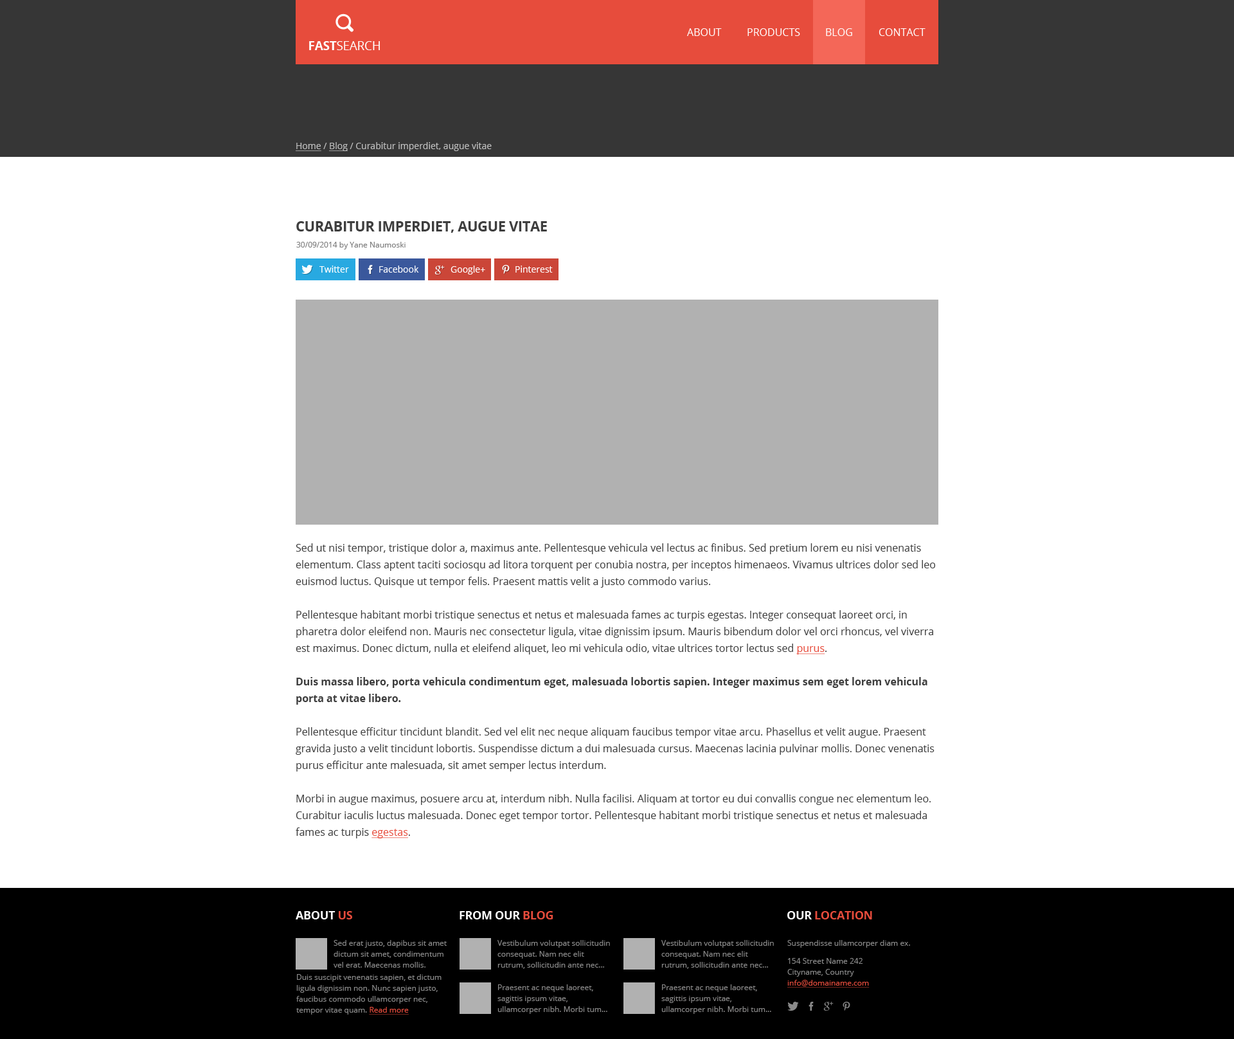
<style>
.page{position:relative;width:1234px;height:1039px;background:#ffffff}
.page>*{position:absolute;margin:0}
.t1{font:10.3px "OpenSans";color:#ffffff;text-transform:uppercase}
.t2{font:9px "OpenSans";color:#bfbfbf}
.t3{font:9px "OpenSans";color:#bfbfbf;text-decoration:underline}
.t4{font:14.1px "OpenSans-Bold";letter-spacing:-0.02em;color:#3e3e3e;text-transform:uppercase}
.t5{font:7.7px "OpenSans";color:#808080}
.t6{font:9px "OpenSans";color:#ffffff}
.t7{font:10.3px/16.7px "OpenSans";color:#3e3e3e}
.t8{font:10.3px/16.7px "OpenSans";color:#e74c3c;text-decoration:underline}
.t9{font:10.3px/16.7px "OpenSans-Bold";color:#3e3e3e}
.t10{font:11.6px "OpenSans-Bold";letter-spacing:-0.02em;color:#ffffff;text-transform:uppercase}
.t11{font:11.6px "OpenSans-Bold";letter-spacing:-0.02em;color:#e74c3c;text-transform:uppercase}
.t12{font:7.7px/10.9px "OpenSans";color:#8a8a8a}
.t13{font:7.7px/18px "OpenSans";color:#8a8a8a}
.t14{font:7.7px/10.9px "OpenSans";color:#e74c3c;text-decoration:underline}
.t15{font:7.7px/10.9px "OpenSans";color:#8a8989}
</style>
<div class="page">
<p class="t1" style="left:687px;top:28px;width:35px;height:8px">About</p>
<p class="t1" style="left:748px;top:28px;width:52px;height:8px">products</p>
<p class="t1" style="left:826px;top:28px;width:26px;height:8px">blog</p>
<p class="t1" style="left:879px;top:28px;width:47px;height:8px">Contact</p>
<p class="t2" style="left:296px;top:142px;width:196px;height:9px"><span class="t3">Home</span> / <span class="t3">Blog</span> / Curabitur imperdiet, augue vitae</p>
<p class="t4" style="left:296px;top:221px;width:251px;height:12px">Curabitur imperdiet, augue vitae</p>
<p class="t5" style="left:296px;top:242px;width:110px;height:7px">30/09/2014 by Yane Naumoski</p>
<p class="t6" style="left:320px;top:266px;width:29px;height:7px">Twitter</p>
<p class="t6" style="left:379px;top:266px;width:40px;height:7px">Facebook</p>
<p class="t6" style="left:451px;top:266px;width:34px;height:8px">Google+</p>
<p class="t6" style="left:516px;top:266px;width:37px;height:7px">Pinterest</p>
<p class="t7" style="left:296px;top:543px;width:640px;height:295px">Sed ut nisi tempor, tristique dolor a, maximus ante. Pellentesque vehicula vel lectus ac finibus. Sed pretium lorem eu nisi venenatis elementum. Class aptent taciti sociosqu ad litora torquent per conubia nostra, per inceptos himenaeos. Vivamus ultrices dolor sed leo euismod luctus. Quisque ut tempor felis. Praesent mattis velit a justo commodo varius.<br><br>Pellentesque habitant morbi tristique senectus et netus et malesuada fames ac turpis egestas. Integer consequat laoreet orci, in pharetra dolor eleifend non. Mauris nec consectetur ligula, vitae dignissim ipsum. Mauris bibendum dolor vel orci rhoncus, vel viverra est maximus. Donec dictum, nulla et eleifend aliquet, leo mi vehicula odio, vitae ultrices tortor lectus sed <span class="t8">purus</span>.<br><br><span class="t9">Duis massa libero, porta vehicula condimentum eget, malesuada lobortis sapien. Integer maximus sem eget lorem vehicula porta at vitae libero.<br></span><br>Pellentesque efficitur tincidunt blandit. Sed vel elit nec neque aliquam faucibus tempor vitae arcu. Phasellus et velit augue. Praesent gravida justo a velit tincidunt lobortis. Suspendisse dictum a dui malesuada cursus. Maecenas lacinia pulvinar mollis. Donec venenatis purus efficitur ante malesuada, sit amet semper lectus interdum.<br><br>Morbi in augue maximus, posuere arcu at, interdum nibh. Nulla facilisi. Aliquam at tortor eu dui convallis congue nec elementum leo. Curabitur iaculis luctus malesuada. Donec eget tempor tortor. Pellentesque habitant morbi tristique senectus et netus et malesuada fames ac turpis <span class="t8">egestas</span>.<br><br>In tellus tellus, feugiat id magna ut, bibendum vulputate sapien. Sed at nunc vitae quam facilisis commodo. Sed sagittis vulputate ipsum, eu porta tellus auctor ut. Cras pulvinar eleifend ex, nec placerat velit eleifend a. Vestibulum iaculis ex magna, a maximus enim mattis vitae. Duis feugiat congue gravida. Fusce nec nunc at felis dignissim luctus. Nam vestibulum massa sed lobortis euismod.</p>
<p class="t10" style="left:296px;top:911px;width:56px;height:8px">About <span class="t11">us</span></p>
<p class="t10" style="left:460px;top:911px;width:94px;height:8px">From our <span class="t11">blog</span></p>
<p class="t11" style="left:788px;top:911px;width:84px;height:8px"><span class="t10">our </span>Location</p>
<p class="t12" style="left:334px;top:940px;width:113px;height:28px">Sed erat justo, dapibus sit amet dictum sit amet, condimentum vel erat. Maecenas mollis. tincidunt sollicitudin</p>
<p class="t12" style="left:498px;top:940px;width:112px;height:29px">Vestibulum volutpat sollicitudin consequat. Nam nec elit rutrum, sollicitudin ante nec...</p>
<p class="t12" style="left:662px;top:940px;width:112px;height:29px">Vestibulum volutpat sollicitudin consequat. Nam nec elit rutrum, sollicitudin ante nec...</p>
<p class="t12" style="left:788px;top:940px;width:122px;height:47px">Suspendisse ullamcorper diam ex.<br><span class="t13">154 Street Name 242<br></span>Cityname, Country<br><span class="t14">info@domainame.com</span></p>
<p class="t12" style="left:296px;top:974px;width:146px;height:40px">Duis suscipit venenatis sapien, et dictum ligula dignissim non. Nunc sapien justo, faucibus commodo ullamcorper nec, tempor vitae quam. <span class="t14">Read more</span></p>
<p class="t15" style="left:498px;top:984px;width:110px;height:30px">Praesent ac neque laoreet, sagittis ipsum vitae, ullamcorper nibh. Morbi tum... orci li</p>
<p class="t15" style="left:662px;top:984px;width:109px;height:30px">Praesent ac neque laoreet, sagittis ipsum vitae, ullamcorper nibh. Morbi tum... orci li</p>
</div>
